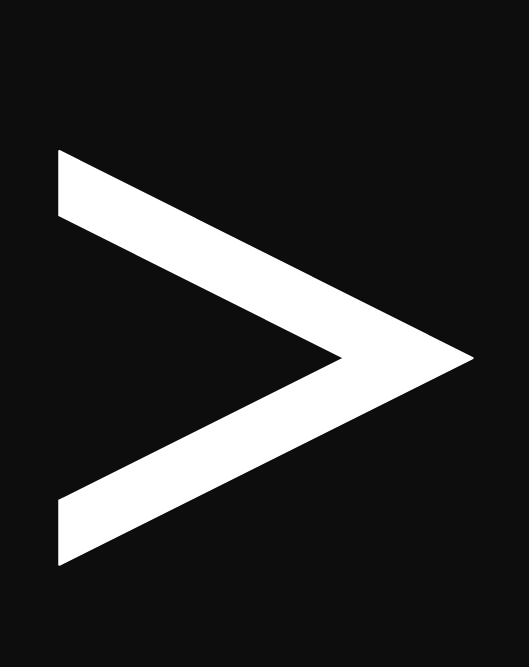
<style>
.page{position:relative;width:529px;height:667px;background:#0d0d0d}
.page>*{position:absolute;margin:0}
.t1{font:800px "LucidaConsole";color:#ffffff;font-weight:bold}
</style>
<div class="page">
<p class="t1" style="left:58px;top:150px;width:416px;height:416px">&gt;</p>
</div>
